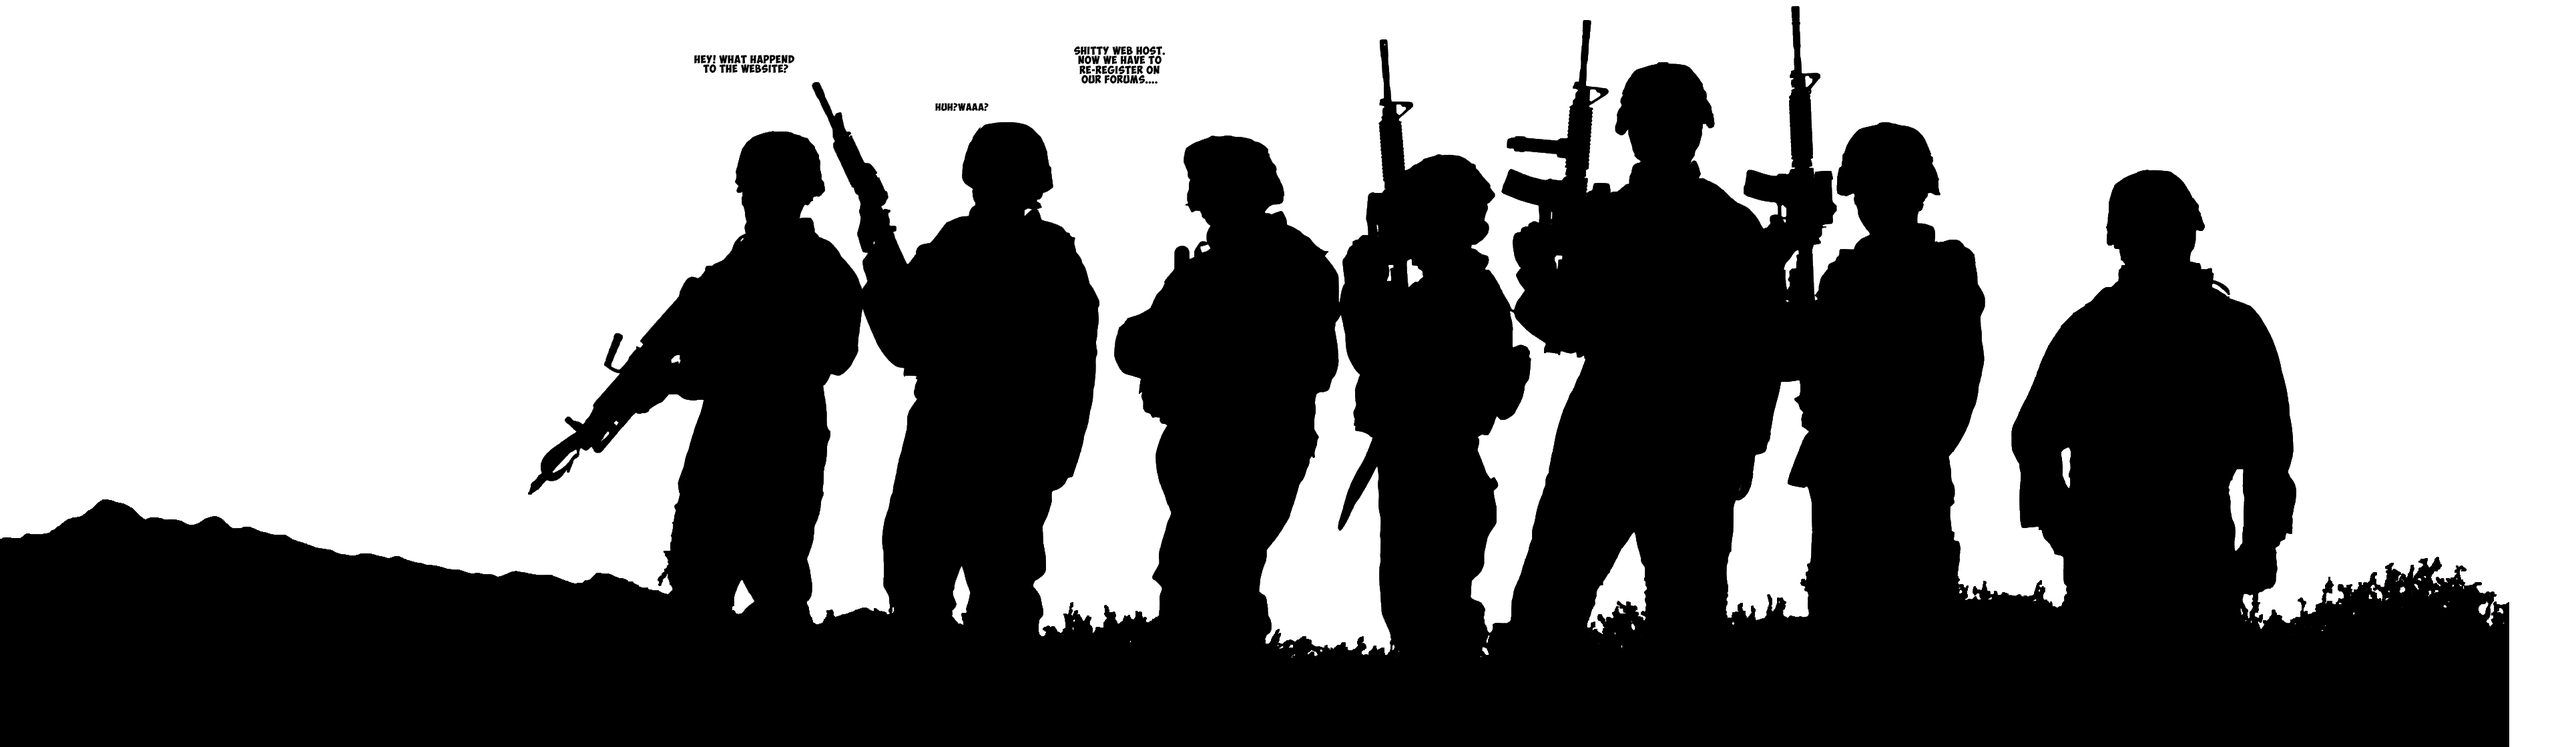
<style>
.page{position:relative;width:2576px;height:747px;background:#ffffff}
.page>*{position:absolute;margin:0}
.t1{font:8px "ObelixPro";letter-spacing:0.05em;color:#000000}
.t2{font:7.3px "ObelixPro";letter-spacing:0.05em;color:#000000}
</style>
<div class="page">
<p class="t1" style="left:1074px;top:46px;width:92px;height:38px;text-align:center">SHITTY WEB HOST.<br>NOW WE HAVE TO<br>RE-REGISTER ON<br>OUR FORUMS....</p>
<p class="t1" style="left:694px;top:55px;width:100px;height:18px;text-align:center">HEY! WHAT HAPPEND <br>TO THE WEBSITE?</p>
<p class="t2" style="left:935px;top:103px;width:54px;height:8px">HUH?WAAA?</p>
</div>
